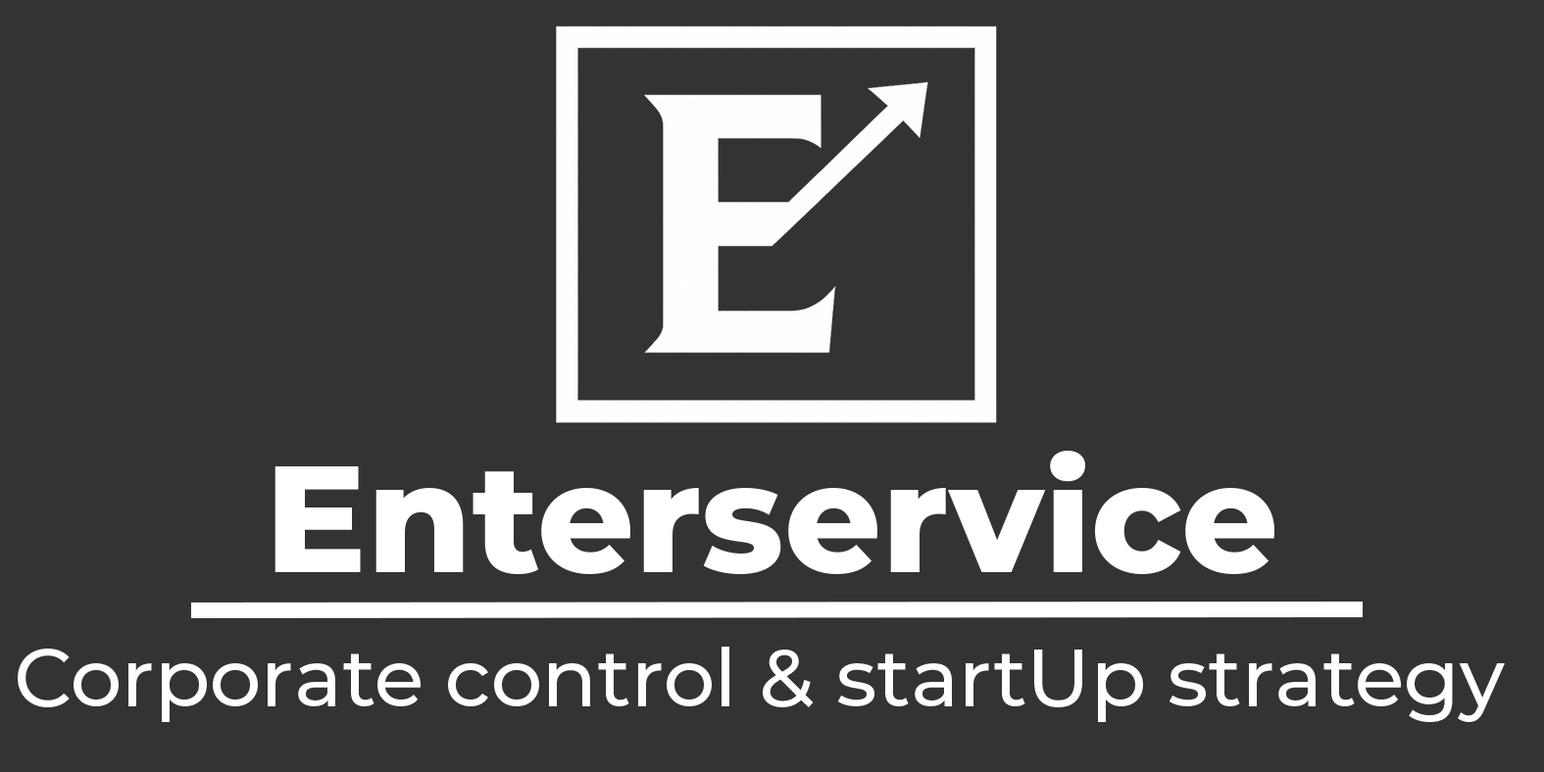
<style>
.page{position:relative;width:1544px;height:772px;background:#333333}
.page>*{position:absolute;margin:0}
.t1{font:151.2px "Montserrat-ExtraBold";color:#ffffff}
.t2{font:80.9px "Montserrat-Medium";color:#ffffff}
</style>
<div class="page">
<p class="t1" style="left:274px;top:451px;width:1000px;height:124px">Enterservice</p>
<p class="t2" style="left:18px;top:647px;width:1487px;height:75px">Corporate control &amp; startUp strategy</p>
</div>
